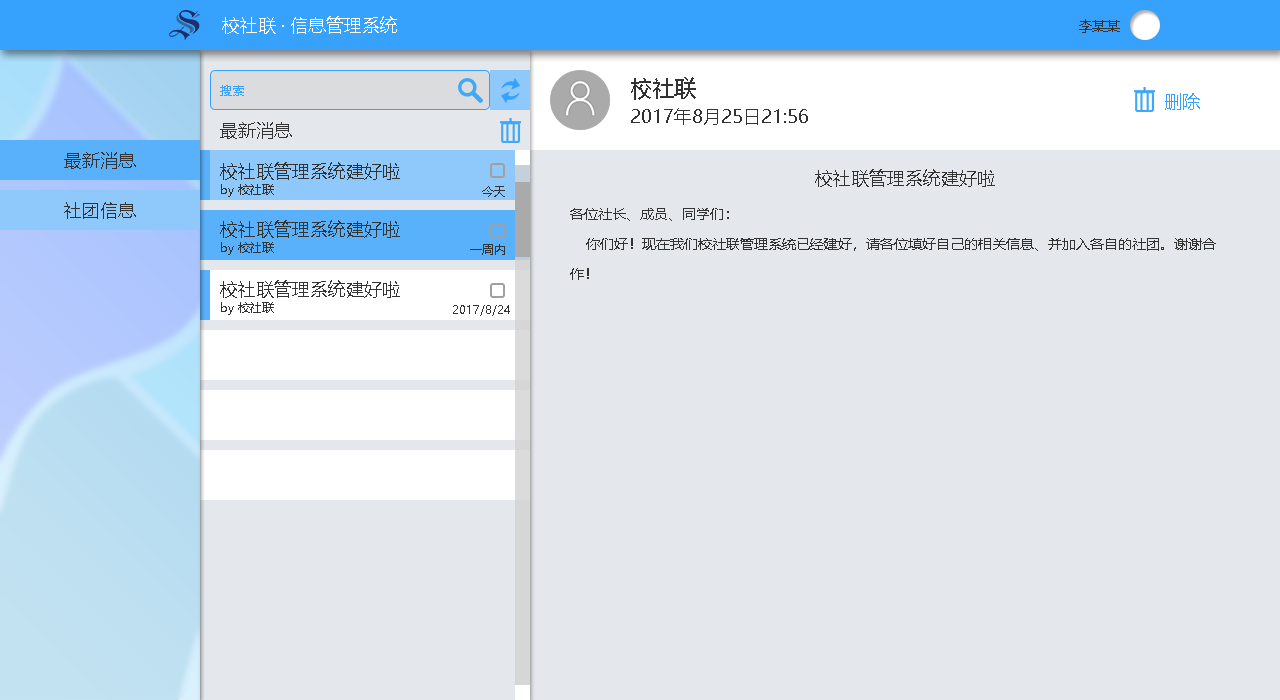
<style>
.page{position:relative;width:1280px;height:700px;background:#e4e8ec}
.page>*{position:absolute;margin:0}
.t1{font:18px "MicrosoftYaHei";color:#ffffff}
.t2{font:14px "MicrosoftYaHei";color:#333333}
.t3{font:22px "MicrosoftYaHei";color:#333333}
.t4{font:12px "MicrosoftYaHei";color:#37a2fe}
.t5{font:18px "MicrosoftYaHei";color:#37a2fe}
.t6{font:18px "MicrosoftYaHei";color:#333333}
.t7{font:12px "MicrosoftYaHei";color:#333333}
.t8{font:14px/30px "MicrosoftYaHei";color:#333333}
</style>
<div class="page">
<p class="t1" style="left:222px;top:16px;width:175px;height:18px">校社联 · 信息管理系统</p>
<p class="t2" style="left:1079px;top:19px;width:41px;height:14px">李某某</p>
<p class="t3" style="left:631px;top:77px;width:65px;height:23px">校社联</p>
<p class="t4" style="left:220px;top:85px;width:24px;height:11px">搜索</p>
<p class="t5" style="left:1165px;top:93px;width:35px;height:17px">删除</p>
<p class="t6" style="left:631px;top:108px;width:177px;height:17px">2017年8月25日21:56</p>
<p class="t6" style="left:220px;top:122px;width:72px;height:17px">最新消息</p>
<p class="t6" style="left:64px;top:152px;width:72px;height:17px">最新消息</p>
<p class="t6" style="left:220px;top:162px;width:180px;height:18px">校社联管理系统建好啦</p>
<p class="t6" style="left:815px;top:169px;width:180px;height:18px">校社联管理系统建好啦</p>
<p class="t7" style="left:221px;top:184px;width:53px;height:13px">by 校社联</p>
<p class="t7" style="left:482px;top:186px;width:23px;height:11px">今天</p>
<p class="t6" style="left:64px;top:202px;width:72px;height:17px">社团信息</p>
<p class="t8" style="left:570px;top:208px;width:646px;height:72px">各位社长、成员、同学们：<br>    你们好！现在我们校社联管理系统已经建好，请各位填好自己的相关信息、并加入各自的社团。谢谢合<br>作！</p>
<p class="t6" style="left:220px;top:220px;width:180px;height:18px">校社联管理系统建好啦</p>
<p class="t7" style="left:221px;top:242px;width:53px;height:13px">by 校社联</p>
<p class="t7" style="left:470px;top:244px;width:35px;height:11px">一周内</p>
<p class="t6" style="left:220px;top:280px;width:180px;height:18px">校社联管理系统建好啦</p>
<p class="t7" style="left:221px;top:302px;width:53px;height:13px">by 校社联</p>
<p class="t7" style="left:453px;top:305px;width:57px;height:11px">2017/8/24</p>
</div>
